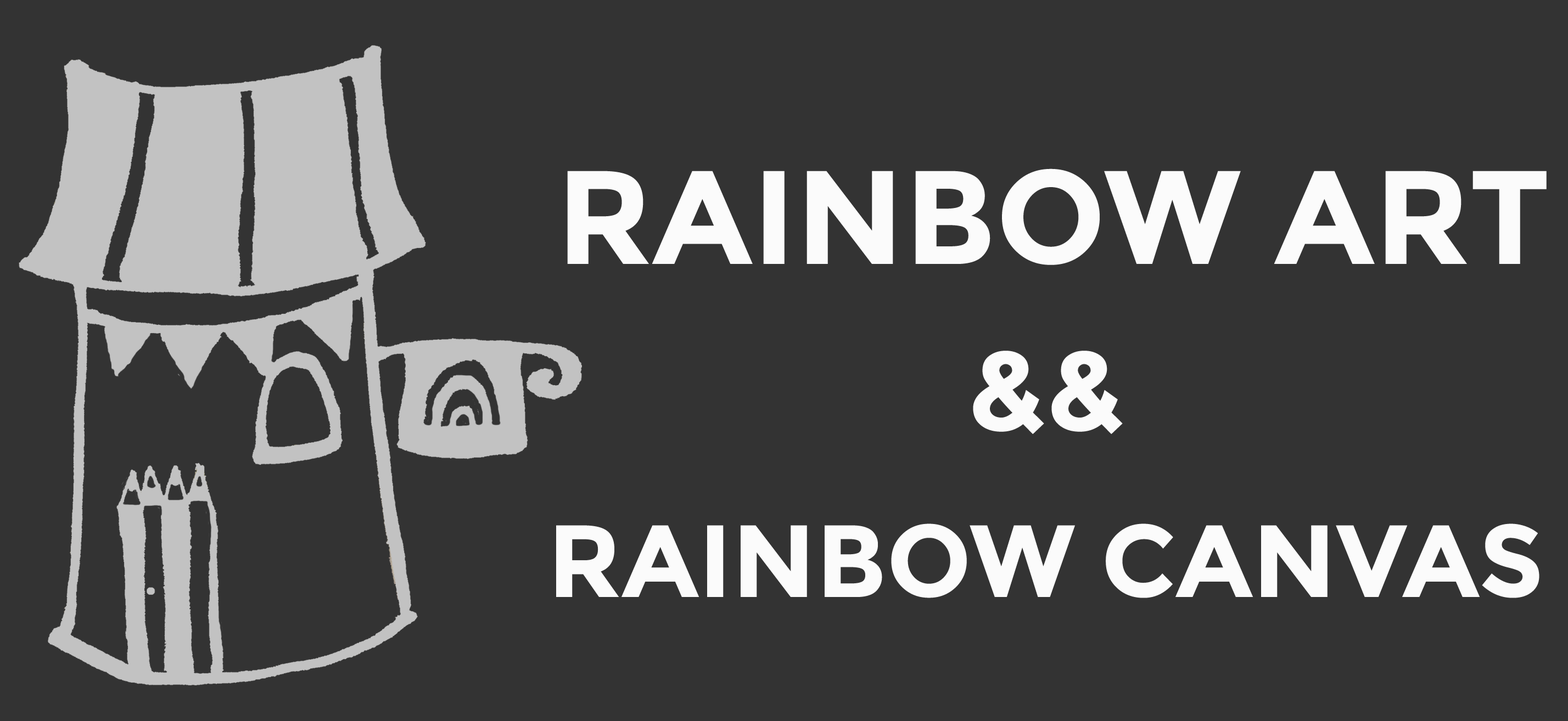
<style>
.page{position:relative;width:1568px;height:721px;background:#333333}
.page>*{position:absolute;margin:0}
.t1{font:132.8px "Montserrat-Bold";color:#fbfbfb}
.t2{font:111.9px "Montserrat-Bold";color:#fbfbfb}
.t3{font:102.4px "Montserrat-Bold";color:#fbfbfb}
</style>
<div class="page">
<p class="t1" style="left:567px;top:169px;width:980px;height:96px">RAINBOW ART</p>
<p class="t2" style="left:973px;top:351px;width:150px;height:83px">&amp;&amp;</p>
<p class="t3" style="left:556px;top:524px;width:983px;height:74px">RAINBOW CANVAS</p>
</div>
